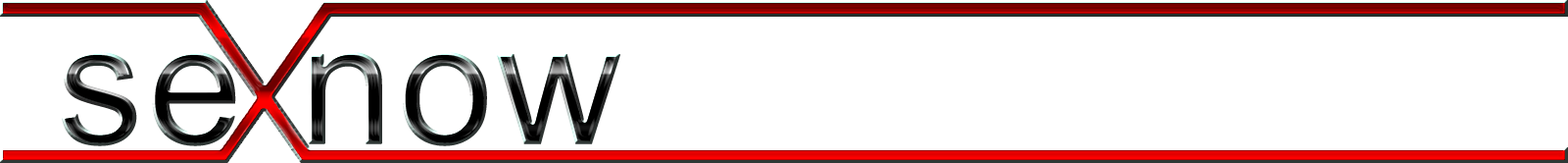
<style>
.page{position:relative;width:1568px;height:163px;background:#ffffff}
.page>*{position:absolute;margin:0}
.t1{font:170.5px "ArialMT";font-weight:bold}
</style>
<div class="page">
<p class="t1" style="left:61px;top:52px;width:559px;height:94px">se now</p>
</div>
